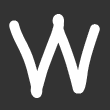
<style>
.page{position:relative;width:110px;height:110px;background:#333333}
.page>*{position:absolute;margin:0}
.t1{font:98px "Bromine";color:#ffffff}
</style>
<div class="page">
<p class="t1" style="left:9px;top:14px;width:91px;height:84px">W</p>
</div>
